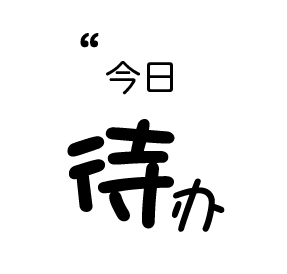
<style>
.page{position:relative;width:287px;height:274px;background:#ffffff}
.page>*{position:absolute;margin:0}
.t1{font:48px "PingFangSC-Regular";letter-spacing:0.04em;color:#000000;font-weight:bold}
.t2{font:36px "HiraMaruPro-W4";letter-spacing:0.04em;color:#000000}
.t3{font:120px "DFPShaoNvW5";letter-spacing:0.04em;color:#000000;font-weight:bold}
.t4{font:60px "DFPShaoNvW5";letter-spacing:0.04em;color:#000000;font-weight:bold}
</style>
<div class="page">
<p class="t1" style="left:80px;top:33px;width:19px;height:15px">“</p>
<p class="t2" style="left:106px;top:61px;width:67px;height:34px">今日</p>
<p class="t3" style="left:67px;top:119px;width:108px;height:110px">待</p>
<p class="t4" style="left:171px;top:178px;width:54px;height:54px">办</p>
</div>
